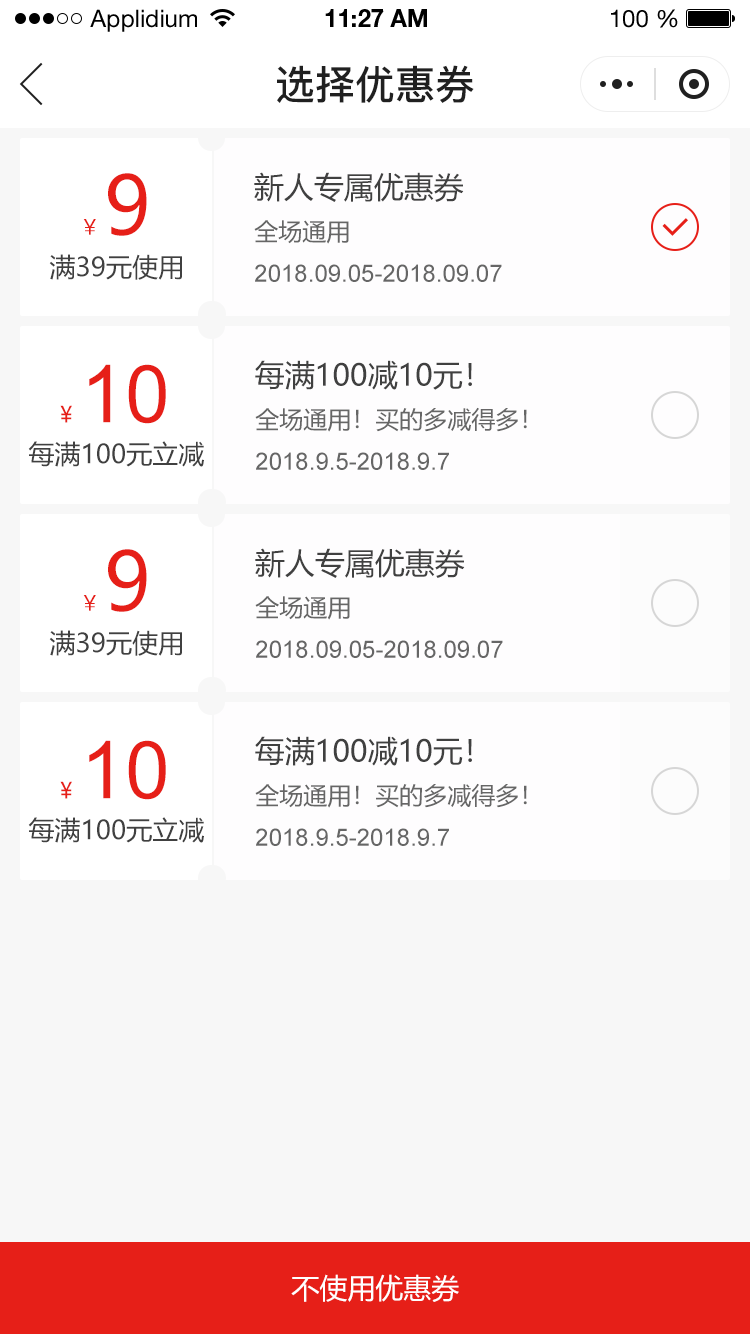
<style>
.page{position:relative;width:750px;height:1334px;background:#f7f7f7}
.page>*{position:absolute;margin:0}
.t1{font:24px "HelveticaNeueLTStd-Roman";color:#000000}
.t2{font:24px "HelveticaNeueLTStd-Bd";color:#000000}
.t3{font:40px "PingFang-SC-Bold";color:#202020;text-transform:uppercase}
.t4{font:80px "MicrosoftYaHei";color:#e61f18;text-transform:uppercase}
.t5{font:30px "MicrosoftYaHei";color:#404040;text-transform:uppercase}
.t6{font:22px "PingFang-SC-Medium";color:#e61f18;text-transform:uppercase}
.t7{font:24px "MicrosoftYaHei";color:#666666;text-transform:uppercase}
.t8{font:26px "MicrosoftYaHei";color:#404040;text-transform:uppercase}
.t9{font:24px "ArialMT";color:#666666;text-transform:uppercase}
.t10{font:80px "ArialMT";color:#e61f18;text-transform:uppercase}
.t11{font:22px "MicrosoftYaHei";color:#e61f18;text-transform:uppercase}
.t12{font:28px "MicrosoftYaHei";color:#ffffff;text-transform:uppercase}
</style>
<div class="page">
<p class="t1" style="left:90px;top:9px;width:107px;height:23px">Applidium</p>
<p class="t2" style="left:325px;top:9px;width:102px;height:18px">11:27 AM</p>
<p class="t1" style="left:611px;top:9px;width:67px;height:19px">100 %</p>
<p class="t3" style="left:277px;top:65px;width:197px;height:38px">选择优惠券</p>
<p class="t4" style="left:108px;top:173px;width:39px;height:63px">9</p>
<p class="t5" style="left:254px;top:172px;width:210px;height:30px">新人专属优惠券</p>
<p class="t6" style="left:83px;top:219px;width:13px;height:16px">¥</p>
<p class="t7" style="left:254px;top:220px;width:95px;height:24px">全场通用</p>
<p class="t8" style="left:49px;top:254px;width:133px;height:26px">满39元使用</p>
<p class="t9" style="left:255px;top:264px;width:247px;height:18px">2018.09.05-2018.09.07</p>
<p class="t10" style="left:89px;top:364px;width:77px;height:60px">10</p>
<p class="t5" style="left:255px;top:360px;width:217px;height:30px">每满100减10元！</p>
<p class="t11" style="left:60px;top:405px;width:12px;height:18px">¥</p>
<p class="t7" style="left:255px;top:407px;width:272px;height:25px">全场通用！买的多减得多！</p>
<p class="t8" style="left:28px;top:441px;width:176px;height:26px">每满100元立减</p>
<p class="t9" style="left:256px;top:452px;width:193px;height:18px">2018.9.5-2018.9.7</p>
<p class="t4" style="left:108px;top:549px;width:39px;height:63px">9</p>
<p class="t5" style="left:255px;top:548px;width:210px;height:30px">新人专属优惠券</p>
<p class="t6" style="left:83px;top:595px;width:13px;height:16px">¥</p>
<p class="t7" style="left:255px;top:596px;width:95px;height:24px">全场通用</p>
<p class="t8" style="left:49px;top:630px;width:133px;height:26px">满39元使用</p>
<p class="t9" style="left:256px;top:640px;width:247px;height:18px">2018.09.05-2018.09.07</p>
<p class="t5" style="left:255px;top:736px;width:217px;height:30px">每满100减10元！</p>
<p class="t10" style="left:89px;top:740px;width:77px;height:60px">10</p>
<p class="t11" style="left:60px;top:781px;width:12px;height:18px">¥</p>
<p class="t7" style="left:255px;top:783px;width:272px;height:25px">全场通用！买的多减得多！</p>
<p class="t8" style="left:28px;top:817px;width:176px;height:26px">每满100元立减</p>
<p class="t9" style="left:256px;top:828px;width:193px;height:18px">2018.9.5-2018.9.7</p>
<p class="t12" style="left:291px;top:1274px;width:168px;height:28px">不使用优惠券</p>
</div>
